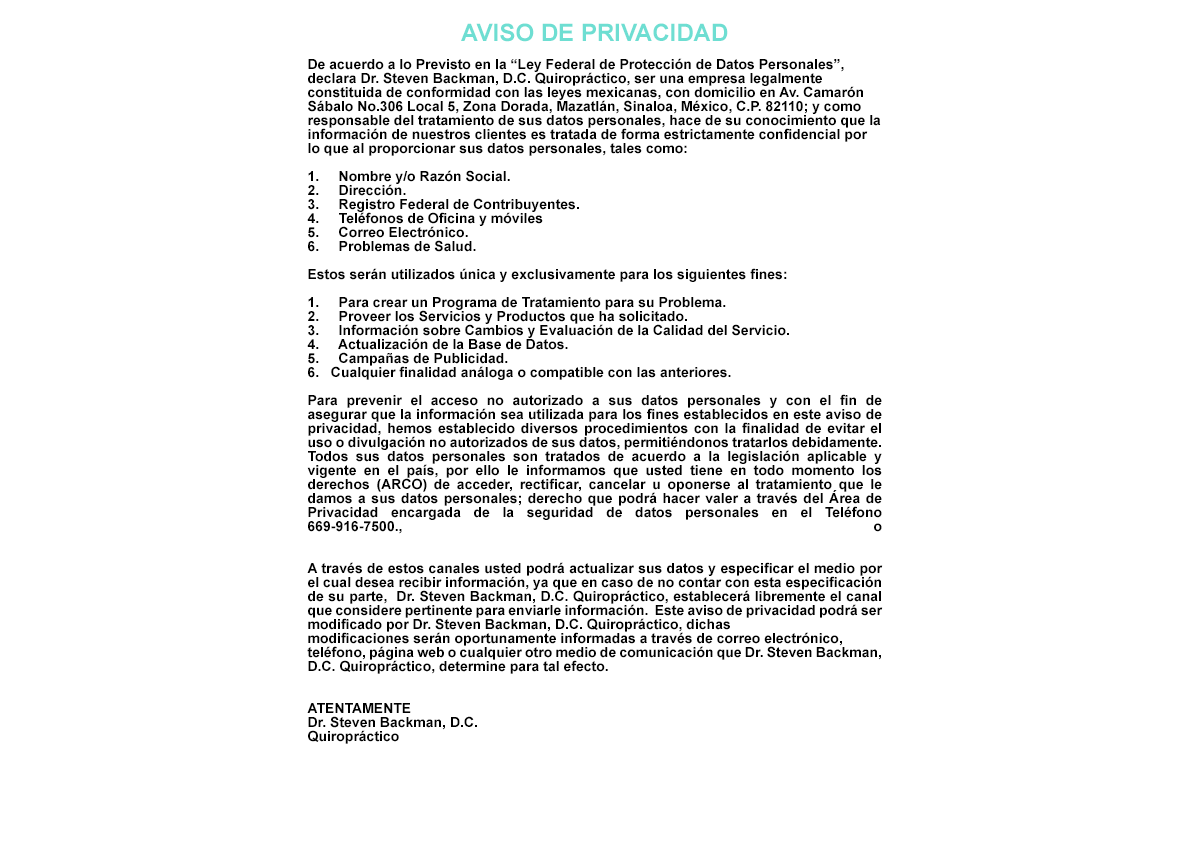
<style>
.page{position:relative;width:1200px;height:860px;background:#ffffff}
.page>*{position:absolute;margin:0}
.t1{font:14px/14px "Arial-BoldMT";color:#000000}
.t2{font:24px/14px "Arial-BoldMT";color:#6eded2}
</style>
<div class="page">
<p class="t1" style="left:307px;top:23px;width:576px;height:721px;text-align:center"><span class="t2">AVISO DE PRIVACIDAD <br><br></span>De acuerdo a lo Previsto en la “Ley Federal de Protección de Datos Personales”, declara Dr. Steven Backman, D.C. Quiropráctico, ser una empresa legalmente <br>constituida de conformidad con las leyes mexicanas, con domicilio en Av. Camarón Sábalo No.306 Local 5, Zona Dorada, Mazatlán, Sinaloa, México, C.P. 82110; y como responsable del tratamiento de sus datos personales, hace de su conocimiento que la información de nuestros clientes es tratada de forma estrictamente confidencial por lo que al proporcionar sus datos personales, tales como:  <br> <br>1.     Nombre y/o Razón Social. <br>2.     Dirección. <br>3.     Registro Federal de Contribuyentes. <br>4.     Teléfonos de Oficina y móviles <br>5.     Correo Electrónico. <br>6.     Problemas de Salud.<br> <br>Estos serán utilizados única y exclusivamente para los siguientes fines:   <br> <br>1.     Para crear un Programa de Tratamiento para su Problema. <br>2.     Proveer los Servicios y Productos que ha solicitado. <br>3.     Información sobre Cambios y Evaluación de la Calidad del Servicio. <br>4.     Actualización de la Base de Datos. <br>5.     Campañas de Publicidad.<br>6.   Cualquier finalidad análoga o compatible con las anteriores. <br> <br>Para prevenir el acceso no autorizado a sus datos personales y con el fin de  <br>asegurar que la información sea utilizada para los fines establecidos en este aviso de <br>privacidad, hemos establecido diversos procedimientos con la finalidad de evitar el uso o divulgación no autorizados de sus datos, permitiéndonos tratarlos debidamente.  Todos sus datos personales son tratados de acuerdo a la legislación aplicable y <br>vigente en el país, por ello le informamos que usted tiene en todo momento los <br>derechos (ARCO) de acceder, rectificar, cancelar u oponerse al tratamiento que le damos a sus datos personales; derecho que podrá hacer valer a través del Área de <br>Privacidad encargada de la seguridad de datos personales en el Teléfono 669-916-7500., o <br>   <br><br>A través de estos canales usted podrá actualizar sus datos y especificar el medio por el cual desea recibir información, ya que en caso de no contar con esta especificación de su parte,  Dr. Steven Backman, D.C. Quiropráctico, establecerá libremente el canal que considere pertinente para enviarle información.  Este aviso de privacidad podrá ser modificado por Dr. Steven Backman, D.C. Quiropráctico, dichas <br>modificaciones serán oportunamente informadas a través de correo electrónico, <br>teléfono, página web o cualquier otro medio de comunicación que Dr. Steven Backman, D.C. Quiropráctico, determine para tal efecto.  <br>  <br><br>ATENTAMENTE <br>Dr. Steven Backman, D.C. <br>Quiropráctico</p>
</div>
